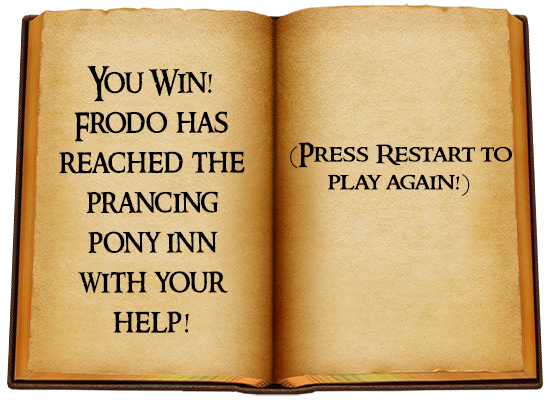
<style>
.page{position:relative;width:550px;height:400px}
.page>*{position:absolute;margin:0}
.t1{font:33.3px "RingbearerMedium";color:#000000;scale:0.92 1}
.t2{font:23.2px "RingbearerMedium";color:#000000;scale:1.16 1}
</style>
<div class="page">
<p class="t1" style="left:59px;top:66px;width:186px;height:267px;text-align:center">You Win!<br>Frodo has<br>reached the<br>prancing<br>pony inn<br>with your<br>help!</p>
<p class="t2" style="left:290px;top:142px;width:222px;height:54px;text-align:center">(Press Restart to<br>play again!)</p>
</div>
